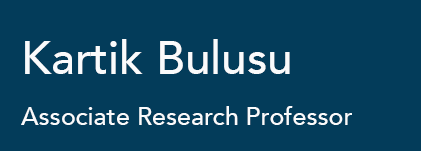
<style>
.page{position:relative;width:421px;height:151px;background:#033c5a}
.page>*{position:absolute;margin:0}
.t1{font:45.8px "Avenir-Medium";color:#fafbfc}
.t2{font:25px "Avenir-Medium";color:#fafbfc}
</style>
<div class="page">
<p class="t1" style="left:25px;top:39px;width:265px;height:35px">Kartik Bulusu</p>
<p class="t2" style="left:21px;top:106px;width:331px;height:19px">Associate Research Professor</p>
</div>
